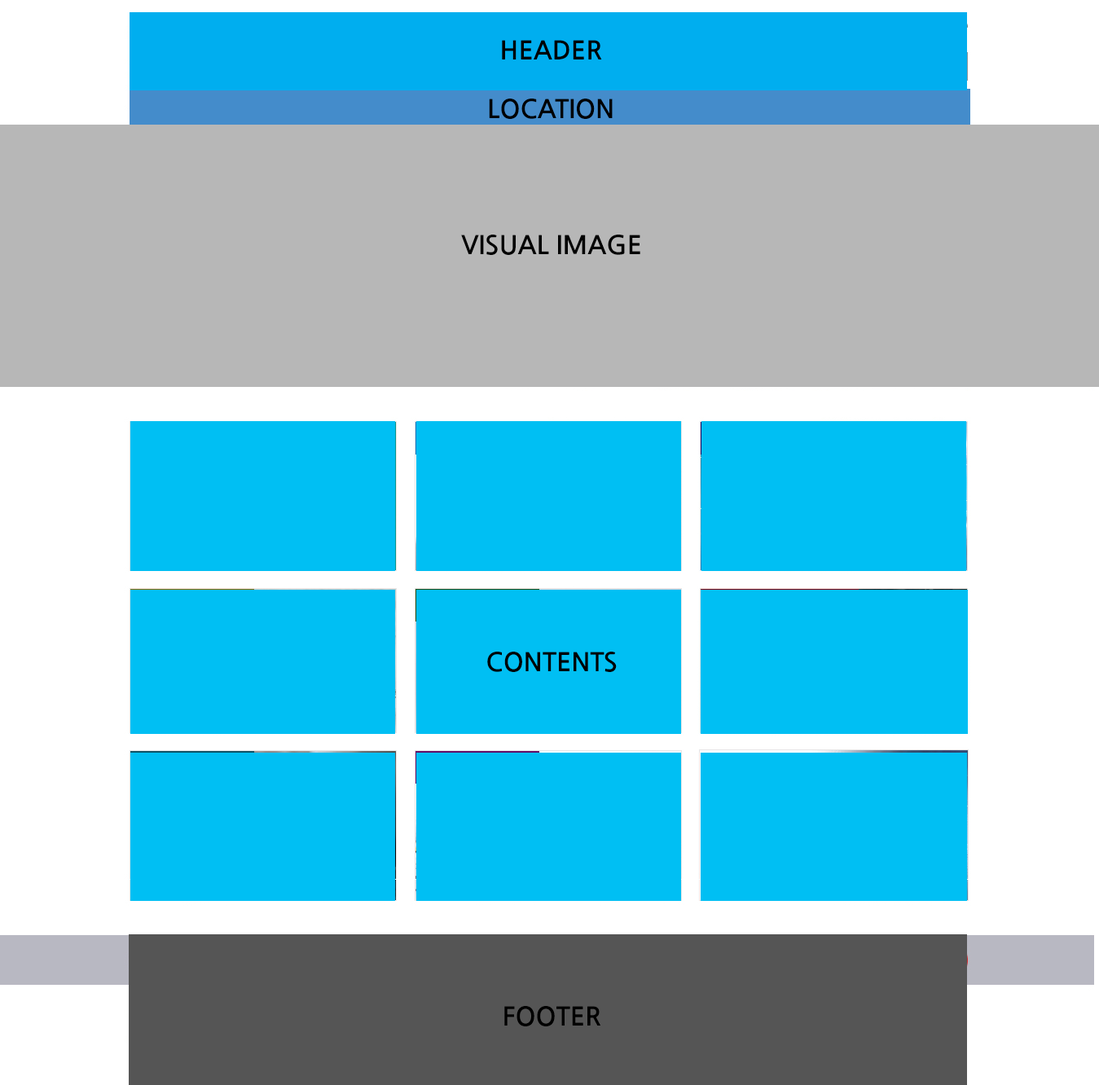
<style>
.page{position:relative;width:1099px;height:1085px;background:#00bff3}
.page>*{position:absolute;margin:0}
.t1{font:25.9px "NanumGothicBold";color:#000000;text-transform:uppercase}
</style>
<div class="page">
<p class="t1" style="left:502px;top:40px;width:100px;height:19px">header</p>
<p class="t1" style="left:489px;top:99px;width:124px;height:20px">location</p>
<p class="t1" style="left:461px;top:235px;width:179px;height:20px">visual image</p>
<p class="t1" style="left:487px;top:652px;width:130px;height:20px">contents</p>
<p class="t1" style="left:504px;top:1006px;width:96px;height:20px">footer</p>
</div>
